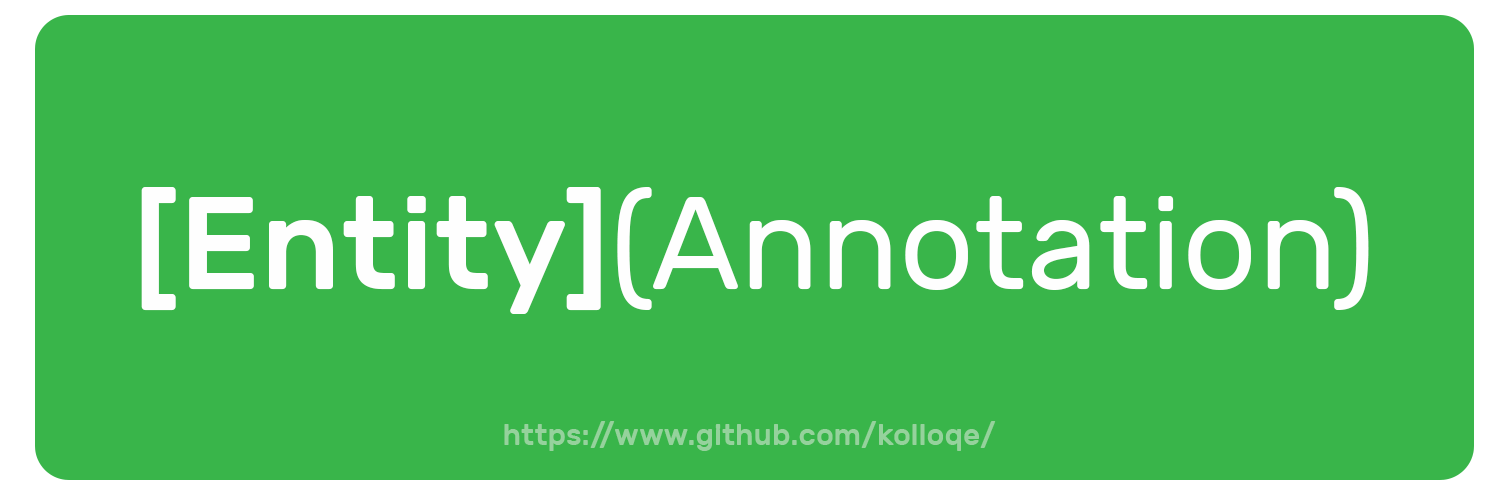
<style>
.page{position:relative;width:1500px;height:500px;background:#39b54a}
.page>*{position:absolute;margin:0}
.t1{font:131.3px "Rubik-Regular";color:#fefefe}
.t2{font:131.3px "Rubik-Medium";color:#fefefe}
.t3{font:30px "Rubik-Medium";color:#95d29c}
</style>
<div class="page">
<p class="t1" style="left:141px;top:187px;width:1228px;height:127px"><span class="t2">[Entity]</span>(Annotation)</p>
<p class="t3" style="left:504px;top:421px;width:492px;height:30px">https://www.github.com/kolloqe/</p>
</div>
